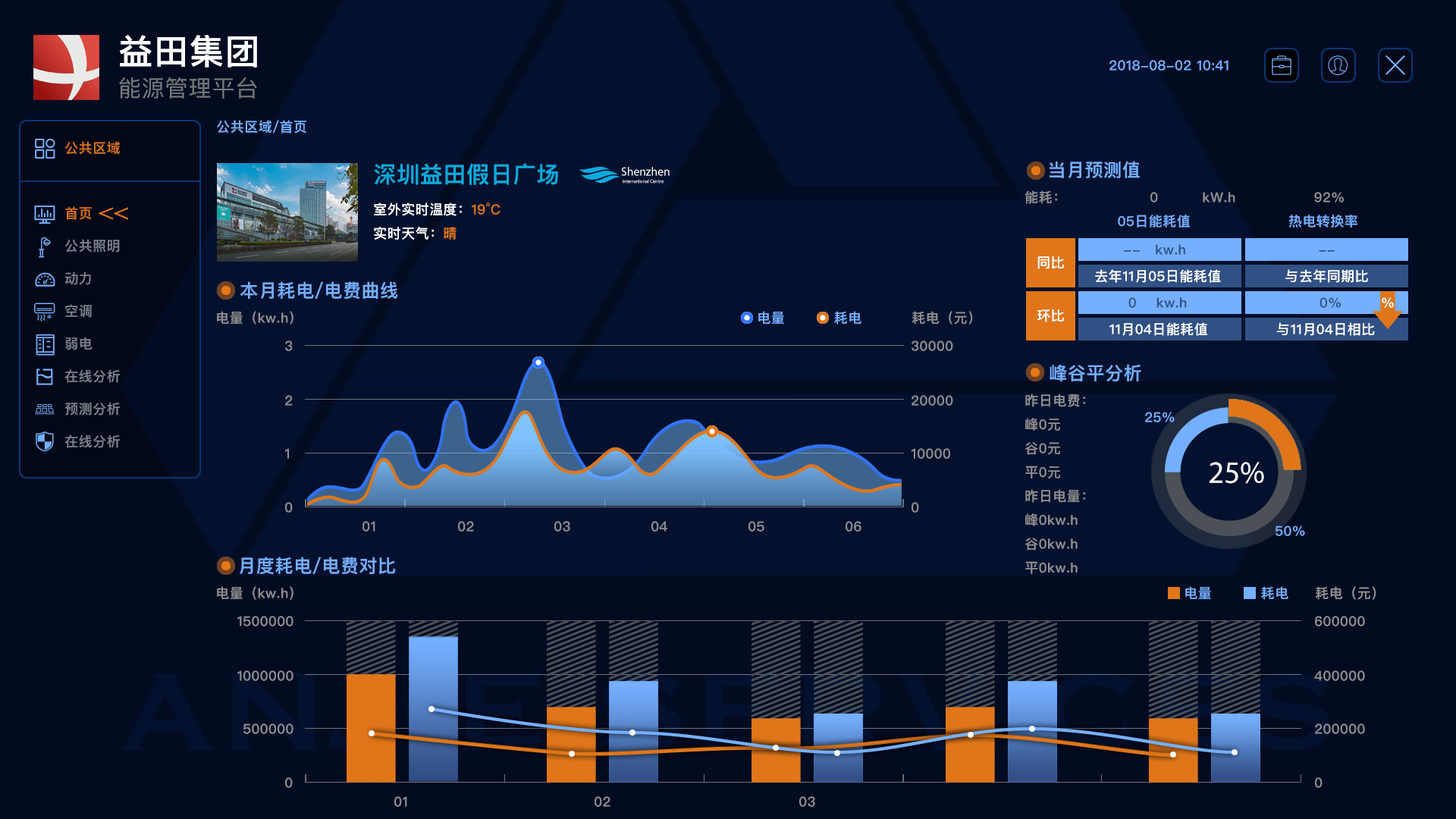
<style>
.page{position:relative;width:1456px;height:819px;background:#03112f}
.page>*{position:absolute;margin:0}
.t1{font:34.8px "PingFangSC-Semibold";letter-spacing:0.025em;color:#ffffff}
.t2{font:13.6px "PingFangSC-Semibold";letter-spacing:0.025em;color:#75afff}
.t3{font:22.9px "PingFangSC-Regular";letter-spacing:0.025em;color:#727a79}
.t4{font:13.6px/32.6px "PingFangSC-Semibold";letter-spacing:0.025em;color:#7a7f89}
.t5{font:13.6px/32.6px "PingFangSC-Semibold";letter-spacing:0.025em;color:#d26f1b}
.t6{font:18.2px "PingFangSC-Semibold";letter-spacing:0.025em;color:#75afff}
.t7{font:22.7px "PingFangSC-Semibold";letter-spacing:0.025em;color:#0caadc}
.t8{font:13.6px "PingFangSC-Semibold";letter-spacing:0.025em;color:#ffffff}
.t9{font:13.6px "PingFangSC-Semibold";letter-spacing:0.025em;color:#e07619}
.t10{font:11.8px "MyriadPro-Regular";color:#ffffff}
.t11{font:4.9px "MyriadPro-Regular"}
.t12{font:13.6px "PingFangSC-Semibold";letter-spacing:0.025em;color:#8f8f8f}
.t13{font:13.6px "PingFangSC-Semibold";letter-spacing:0.025em;color:#315184}
.t14{font:31.1px "MyriadPro-Regular";color:#ffffff}
</style>
<div class="page">
<p class="t1" style="left:119px;top:35px;width:138px;height:32px">益田集团</p>
<p class="t2" style="left:1109px;top:60px;width:119px;height:11px">2018-08-02 10:41</p>
<p class="t3" style="left:119px;top:77px;width:138px;height:22px">能源管理平台</p>
<p class="t2" style="left:217px;top:120px;width:89px;height:13px">公共区域/首页</p>
<p class="t4" style="left:64px;top:141px;width:57px;height:307px"><span class="t5">公共区域<br><br>首页<br></span>公共照明<br>动力<br>空调<br>弱电<br>在线分析<br>预测分析<br>在线分析</p>
<p class="t6" style="left:1050px;top:161px;width:90px;height:18px">当月预测值</p>
<p class="t7" style="left:374px;top:163px;width:184px;height:77px">深圳益田假日广场<br><span class="t8">室外实时温度：</span><span class="t9">19°C<br></span><span class="t8">实时天气：</span><span class="t9">晴</span></p>
<p class="t10" style="left:621px;top:167px;width:49px;height:9px">Shenzhen</p>
<p class="t11" style="left:623px;top:179px;width:41px;height:5px">International Centre</p>
<p class="t12" style="left:1025px;top:190px;width:332px;height:37px">能耗：                 0         kW.h                92%<br>                   <span class="t2">05日能耗值                    热电转换率</span></p>
<p class="t13" style="left:1124px;top:244px;width:211px;height:11px">--   kw.h                           --</p>
<p class="t8" style="left:1037px;top:256px;width:27px;height:13px">同比</p>
<p class="t8" style="left:1095px;top:269px;width:273px;height:14px">去年11月05日能耗值             与去年同期比</p>
<p class="t6" style="left:240px;top:281px;width:158px;height:19px">本月耗电/电费曲线</p>
<p class="t13" style="left:1128px;top:297px;width:266px;height:11px">0    kw.h                           0%        <span class="t8">%</span></p>
<p class="t12" style="left:217px;top:311px;width:76px;height:14px">电量（kw.h）</p>
<p class="t2" style="left:758px;top:311px;width:103px;height:14px">电量          耗电</p>
<p class="t12" style="left:912px;top:311px;width:61px;height:14px">耗电（元）</p>
<p class="t8" style="left:1037px;top:309px;width:27px;height:13px">环比</p>
<p class="t8" style="left:1109px;top:322px;width:266px;height:14px">11月04日能耗值              与11月04日相比</p>
<p class="t12" style="left:285px;top:340px;width:8px;height:11px">3</p>
<p class="t12" style="left:912px;top:340px;width:41px;height:11px">30000</p>
<p class="t6" style="left:1050px;top:364px;width:91px;height:17px">峰谷平分析</p>
<p class="t12" style="left:285px;top:395px;width:8px;height:11px">2</p>
<p class="t12" style="left:912px;top:395px;width:41px;height:11px">20000</p>
<p class="t12" style="left:1025px;top:394px;width:61px;height:180px">昨日电费：     <br>峰0元           <br>谷0元           <br>平0元<br>昨日电量：     <br>峰0kw.h       <br>谷0kw.h        <br>平0kw.h</p>
<p class="t2" style="left:1145px;top:412px;width:30px;height:10px">25%</p>
<p class="t12" style="left:285px;top:448px;width:4px;height:11px">1</p>
<p class="t12" style="left:912px;top:448px;width:38px;height:11px">10000</p>
<p class="t14" style="left:1210px;top:462px;width:54px;height:22px">25%</p>
<p class="t12" style="left:285px;top:502px;width:8px;height:11px">0</p>
<p class="t12" style="left:912px;top:502px;width:7px;height:11px">0</p>
<p class="t12" style="left:362px;top:521px;width:13px;height:11px">01</p>
<p class="t12" style="left:458px;top:521px;width:16px;height:11px">02</p>
<p class="t12" style="left:554px;top:521px;width:16px;height:11px">03</p>
<p class="t12" style="left:651px;top:521px;width:16px;height:11px">04</p>
<p class="t12" style="left:748px;top:521px;width:16px;height:11px">05</p>
<p class="t12" style="left:846px;top:521px;width:15px;height:11px">06</p>
<p class="t2" style="left:1275px;top:526px;width:30px;height:10px">50%</p>
<p class="t6" style="left:240px;top:557px;width:156px;height:18px">月度耗电/电费对比</p>
<p class="t12" style="left:217px;top:586px;width:76px;height:14px">电量（kw.h）</p>
<p class="t2" style="left:1185px;top:586px;width:103px;height:14px">电量          耗电</p>
<p class="t12" style="left:1315px;top:586px;width:61px;height:14px">耗电（元）</p>
<p class="t12" style="left:237px;top:616px;width:56px;height:10px">1500000</p>
<p class="t12" style="left:1315px;top:616px;width:50px;height:10px">600000</p>
<p class="t12" style="left:237px;top:670px;width:56px;height:11px">1000000</p>
<p class="t12" style="left:1314px;top:670px;width:51px;height:11px">400000</p>
<p class="t12" style="left:243px;top:723px;width:50px;height:11px">500000</p>
<p class="t12" style="left:1315px;top:723px;width:50px;height:11px">200000</p>
<p class="t12" style="left:285px;top:777px;width:8px;height:11px">0</p>
<p class="t12" style="left:1315px;top:777px;width:8px;height:11px">0</p>
<p class="t12" style="left:394px;top:796px;width:13px;height:11px">01</p>
<p class="t12" style="left:595px;top:796px;width:15px;height:11px">02</p>
<p class="t12" style="left:799px;top:796px;width:16px;height:11px">03</p>
</div>
